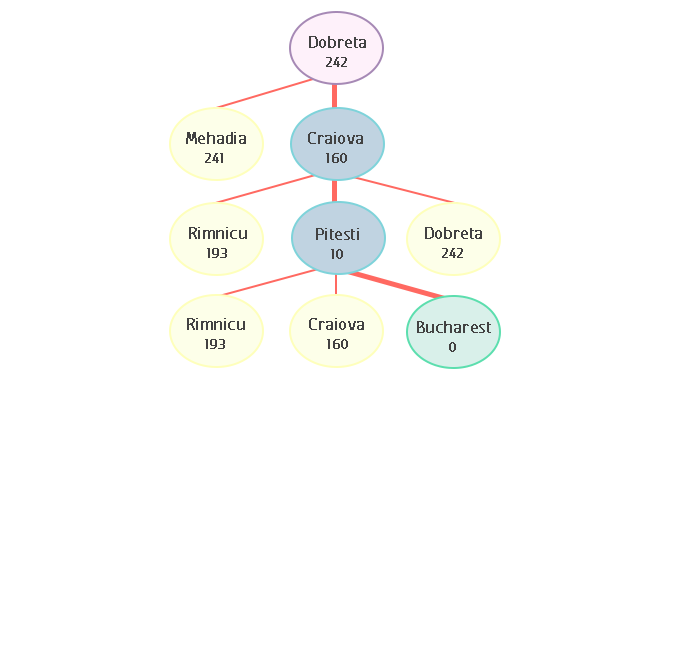
<style>
.page{position:relative;width:674px;height:660px;background:#ffffff}
.page>*{position:absolute;margin:0}
.t1{font:20.8px "FCActiveRegular";color:#424242;font-weight:bold}
.t2{font:16.7px "FCActiveRegular";color:#424141;font-weight:bold}
</style>
<div class="page">
<p class="t1" style="left:309px;top:36px;width:57px;height:12px">Dobreta</p>
<p class="t2" style="left:326px;top:57px;width:21px;height:10px">242</p>
<p class="t1" style="left:186px;top:132px;width:60px;height:12px">Mehadia</p>
<p class="t1" style="left:308px;top:132px;width:55px;height:12px">Craiova</p>
<p class="t2" style="left:205px;top:153px;width:18px;height:10px">241</p>
<p class="t2" style="left:326px;top:153px;width:21px;height:10px">160</p>
<p class="t1" style="left:189px;top:227px;width:58px;height:12px">Rimnicu</p>
<p class="t1" style="left:316px;top:228px;width:43px;height:12px">Pitesti</p>
<p class="t1" style="left:425px;top:227px;width:57px;height:12px">Dobreta</p>
<p class="t2" style="left:207px;top:248px;width:20px;height:10px">193</p>
<p class="t2" style="left:331px;top:249px;width:12px;height:10px">10</p>
<p class="t2" style="left:442px;top:248px;width:21px;height:10px">242</p>
<p class="t1" style="left:187px;top:318px;width:58px;height:12px">Rimnicu</p>
<p class="t1" style="left:309px;top:318px;width:55px;height:12px">Craiova</p>
<p class="t1" style="left:417px;top:321px;width:74px;height:12px">Bucharest</p>
<p class="t2" style="left:205px;top:339px;width:20px;height:10px">193</p>
<p class="t2" style="left:327px;top:339px;width:21px;height:10px">160</p>
<p class="t2" style="left:449px;top:342px;width:7px;height:10px">0</p>
</div>
